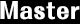
<style>
.page{position:relative;width:80px;height:24px;background:#000000}
.page>*{position:absolute;margin:0}
.t1{font:21.9px "FolkPro-Heavy";letter-spacing:0.05em;color:#ffffff;scale:0.94 1}
</style>
<div class="page">
<p class="t1" style="left:0px;top:1px;width:80px;height:19px">Master</p>
</div>
